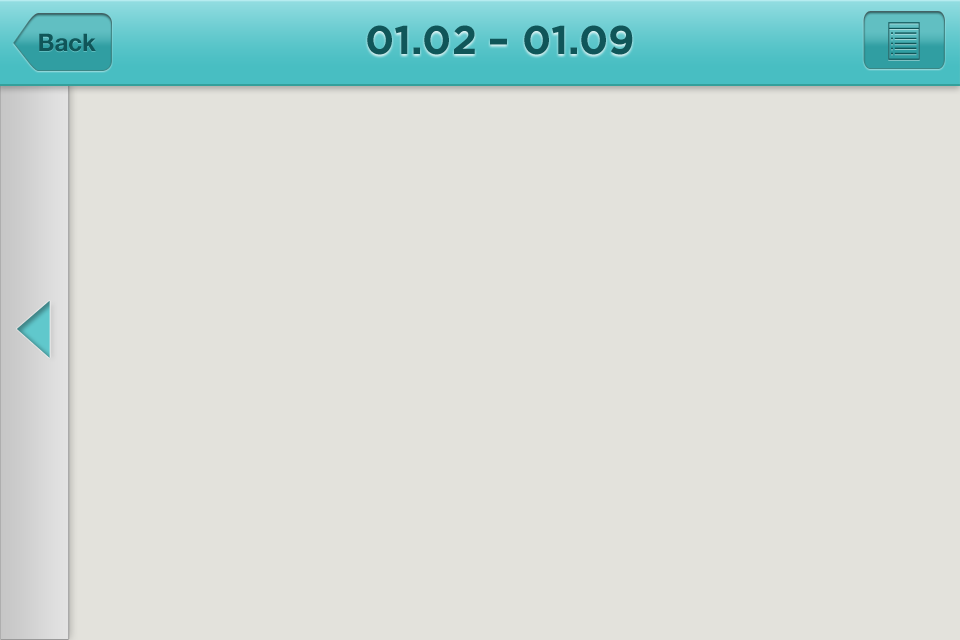
<style>
.page{position:relative;width:960px;height:640px;background:#e3e2dc}
.page>*{position:absolute;margin:0}
.t1{font:40px "Gotham-Bold";color:#105659}
.t2{font:24px "HelveticaNeue-Bold";color:#105659}
</style>
<div class="page">
<p class="t1" style="left:367px;top:25px;width:266px;height:30px">01.02 – 01.09</p>
<p class="t2" style="left:39px;top:33px;width:57px;height:19px">Back</p>
</div>
